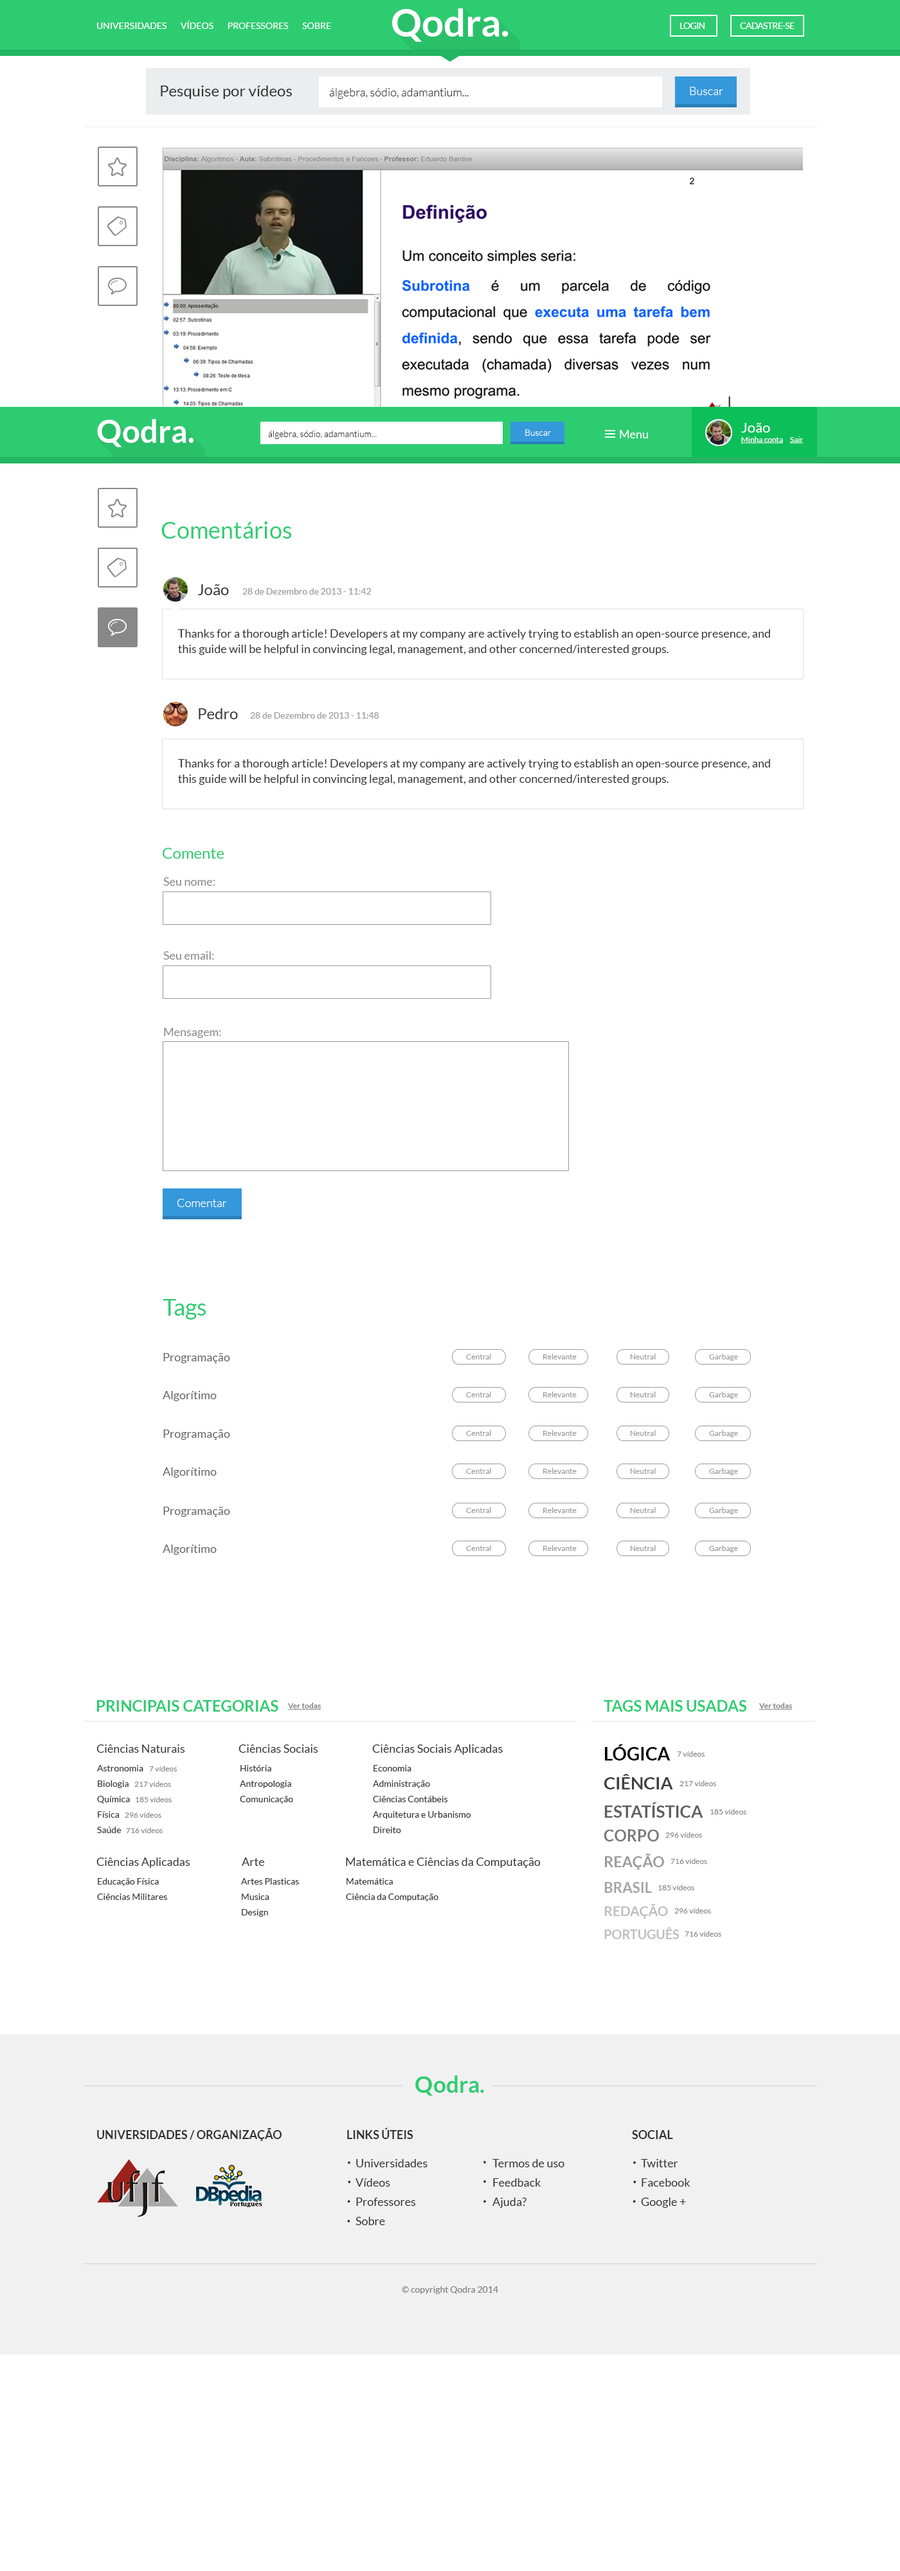
<style>
.page{position:relative;width:900px;height:2571px;background:#ffffff}
.page>*{position:absolute;margin:0}
.t1{font:38.3px "Lato-Bold";color:#ffffff}
.t2{font:9px "Lato-Regular";color:#ffffff}
.t3{font:9px "Lato-Regular";letter-spacing:-0.05em;color:#ffffff}
.t4{font:15.4px "Lato-Regular";color:#333333}
.t5{font:11.6px "Lato-Light";color:#333333}
.t6{font:11.6px "Lato-Light";color:#ffffff}
.t7{font:31.8px "Lato-Bold";color:#ffffff}
.t8{font:14.1px "Lato-Regular";color:#ffffff}
.t9{font:9px "Lato-Light";color:#333333}
.t10{font:9px "Lato-Light";color:#ffffff}
.t11{font:11.6px "Lato-Regular";color:#ffffff}
.t12{font:7.7px "Lato-Regular";color:#ffffff;text-decoration:underline}
.t13{font:23.1px "Lato-Regular";color:#2ecc71}
.t14{font:9px "Lato-Regular";color:#999999}
.t15{font:11.6px/15.4px "Lato-Regular";color:#333333}
.t16{font:15.4px "Lato-Regular";color:#2ecc71}
.t17{font:11.6px "Lato-Regular";color:#888888}
.t18{font:11.6px "Lato-Regular";color:#666666}
.t19{font:7.7px "Lato-Regular";color:#999999}
.t20{font:15.4px "Lato-Bold";color:#2ecc71;text-transform:uppercase}
.t21{font:7.7px "Lato-Bold";color:#818181;text-decoration:underline}
.t22{font:11.6px "Lato-Regular";color:#333333}
.t23{font:18px "Lato-Bold";color:#000000;text-transform:uppercase}
.t24{font:7.7px "Lato-Regular";color:#878686}
.t25{font:9px/15.4px "Lato-Regular";color:#333333}
.t26{font:17.3px "Lato-Bold";color:#404040;text-transform:uppercase}
.t27{font:16.5px "Lato-Bold";color:#5f5f5f;text-transform:uppercase}
.t28{font:15.8px "Lato-Bold";color:#797979;text-transform:uppercase}
.t29{font:15px "Lato-Bold";color:#9a9a9a;text-transform:uppercase}
.t30{font:14.3px "Lato-Bold";color:#a4a4a4;text-transform:uppercase}
.t31{font:13.5px "Lato-Bold";color:#bebebe;text-transform:uppercase}
.t32{font:12.8px "Lato-Bold";color:#bebebe;text-transform:uppercase}
.t33{font:23.4px "Lato-Bold";color:#2ecc71}
.t34{font:11.6px "Lato-Bold";color:#333333;text-transform:uppercase}
.t35{font:11.6px/19.3px "Lato-Regular";color:#333333}
.t36{font:9.3px "Lato-Regular";color:#7d7d7d}
</style>
<div class="page">
<p class="t1" style="left:392px;top:8px;width:117px;height:34px">Qodra.</p>
<p class="t2" style="left:97px;top:21px;width:234px;height:8px">UNIVERSIDADES        VÍDEOS        PROFESSORES        SOBRE</p>
<p class="t3" style="left:680px;top:22px;width:25px;height:7px">LOGIN</p>
<p class="t3" style="left:740px;top:22px;width:55px;height:7px">CADASTRE-SE</p>
<p class="t4" style="left:161px;top:86px;width:131px;height:13px">Pesquise por vídeos</p>
<p class="t5" style="left:329px;top:88px;width:140px;height:11px">álgebra, sódio, adamantium...</p>
<p class="t6" style="left:690px;top:87px;width:33px;height:8px">Buscar</p>
<p class="t7" style="left:97px;top:419px;width:97px;height:28px">Qodra.</p>
<p class="t8" style="left:741px;top:423px;width:29px;height:10px">João</p>
<p class="t9" style="left:268px;top:431px;width:109px;height:8px">álgebra, sódio, adamantium...</p>
<p class="t10" style="left:525px;top:429px;width:26px;height:7px">Buscar</p>
<p class="t11" style="left:620px;top:430px;width:28px;height:8px">Menu</p>
<p class="t12" style="left:741px;top:437px;width:43px;height:7px">Minha conta</p>
<p class="t12" style="left:789px;top:437px;width:15px;height:7px">Sair</p>
<p class="t13" style="left:161px;top:521px;width:131px;height:18px">Comentários</p>
<p class="t4" style="left:197px;top:584px;width:32px;height:11px">João</p>
<p class="t14" style="left:242px;top:588px;width:129px;height:7px">28 de Dezembro de 2013 - 11:42</p>
<p class="t15" style="left:177px;top:629px;width:593px;height:26px">Thanks for a thorough article! Developers at my company are actively trying to establish an open-source presence, and this guide will be helpful in convincing legal, management, and other concerned/interested groups.</p>
<p class="t4" style="left:199px;top:708px;width:39px;height:11px">Pedro</p>
<p class="t14" style="left:250px;top:712px;width:129px;height:7px">28 de Dezembro de 2013 - 11:48</p>
<p class="t15" style="left:177px;top:759px;width:593px;height:26px">Thanks for a thorough article! Developers at my company are actively trying to establish an open-source presence, and this guide will be helpful in convincing legal, management, and other concerned/interested groups.</p>
<p class="t16" style="left:163px;top:848px;width:61px;height:11px">Comente</p>
<p class="t17" style="left:163px;top:878px;width:52px;height:8px">Seu nome:</p>
<p class="t17" style="left:163px;top:951px;width:51px;height:9px">Seu email:</p>
<p class="t17" style="left:164px;top:1028px;width:57px;height:10px">Mensagem:</p>
<p class="t6" style="left:177px;top:1199px;width:50px;height:8px">Comentar</p>
<p class="t13" style="left:163px;top:1299px;width:43px;height:21px">Tags</p>
<p class="t18" style="left:163px;top:1353px;width:67px;height:11px">Programação</p>
<p class="t19" style="left:466px;top:1354px;width:25px;height:6px">Central</p>
<p class="t19" style="left:543px;top:1354px;width:34px;height:6px">Relevante</p>
<p class="t19" style="left:630px;top:1354px;width:26px;height:6px">Neutral</p>
<p class="t19" style="left:709px;top:1354px;width:29px;height:7px">Garbage</p>
<p class="t18" style="left:163px;top:1391px;width:54px;height:10px">Algorítimo</p>
<p class="t19" style="left:466px;top:1392px;width:25px;height:6px">Central</p>
<p class="t19" style="left:543px;top:1392px;width:34px;height:6px">Relevante</p>
<p class="t19" style="left:630px;top:1392px;width:26px;height:6px">Neutral</p>
<p class="t19" style="left:709px;top:1392px;width:29px;height:7px">Garbage</p>
<p class="t18" style="left:163px;top:1430px;width:67px;height:10px">Programação</p>
<p class="t19" style="left:466px;top:1430px;width:25px;height:6px">Central</p>
<p class="t19" style="left:543px;top:1430px;width:34px;height:6px">Relevante</p>
<p class="t19" style="left:630px;top:1430px;width:26px;height:6px">Neutral</p>
<p class="t19" style="left:709px;top:1430px;width:29px;height:7px">Garbage</p>
<p class="t18" style="left:163px;top:1468px;width:54px;height:10px">Algorítimo</p>
<p class="t19" style="left:466px;top:1468px;width:25px;height:6px">Central</p>
<p class="t19" style="left:543px;top:1468px;width:34px;height:6px">Relevante</p>
<p class="t19" style="left:630px;top:1468px;width:26px;height:6px">Neutral</p>
<p class="t19" style="left:709px;top:1468px;width:29px;height:7px">Garbage</p>
<p class="t18" style="left:163px;top:1507px;width:67px;height:10px">Programação</p>
<p class="t19" style="left:466px;top:1508px;width:25px;height:5px">Central</p>
<p class="t19" style="left:543px;top:1508px;width:34px;height:5px">Relevante</p>
<p class="t19" style="left:630px;top:1508px;width:26px;height:5px">Neutral</p>
<p class="t19" style="left:709px;top:1508px;width:29px;height:7px">Garbage</p>
<p class="t18" style="left:163px;top:1545px;width:54px;height:10px">Algorítimo</p>
<p class="t19" style="left:466px;top:1545px;width:25px;height:6px">Central</p>
<p class="t19" style="left:543px;top:1545px;width:34px;height:6px">Relevante</p>
<p class="t19" style="left:630px;top:1545px;width:26px;height:6px">Neutral</p>
<p class="t19" style="left:709px;top:1545px;width:29px;height:8px">Garbage</p>
<p class="t20" style="left:96px;top:1700px;width:182px;height:12px">Principais categorias</p>
<p class="t21" style="left:288px;top:1703px;width:33px;height:7px">Ver todas</p>
<p class="t20" style="left:604px;top:1700px;width:143px;height:12px">Tags mais usadas</p>
<p class="t21" style="left:759px;top:1703px;width:34px;height:7px">Ver todas</p>
<p class="t22" style="left:96px;top:1745px;width:89px;height:8px">Ciências Naturais</p>
<p class="t22" style="left:239px;top:1745px;width:79px;height:8px">Ciências Sociais</p>
<p class="t22" style="left:372px;top:1745px;width:131px;height:10px">Ciências Sociais Aplicadas</p>
<p class="t23" style="left:605px;top:1744px;width:65px;height:17px">Lógica</p>
<p class="t24" style="left:677px;top:1751px;width:28px;height:6px">7 vídeos</p>
<p class="t25" style="left:97px;top:1765px;width:46px;height:68px">Astronomia<br>Biologia<br>Química<br>Física<br>Saúde</p>
<p class="t24" style="left:149px;top:1766px;width:28px;height:6px">7 vídeos</p>
<p class="t25" style="left:240px;top:1765px;width:53px;height:39px">História<br>Antropologia<br>Comunicação</p>
<p class="t25" style="left:373px;top:1765px;width:98px;height:68px">Economia<br>Administração<br>Ciências Contábeis<br>Arquitetura e Urbanismo<br>Direito</p>
<p class="t24" style="left:134px;top:1781px;width:37px;height:6px">217 vídeos</p>
<p class="t26" style="left:604px;top:1774px;width:69px;height:16px">Ciência</p>
<p class="t24" style="left:680px;top:1781px;width:36px;height:6px">217 vídeos</p>
<p class="t24" style="left:136px;top:1797px;width:36px;height:6px">185 vídeos</p>
<p class="t27" style="left:604px;top:1803px;width:99px;height:15px">Estatística</p>
<p class="t24" style="left:125px;top:1812px;width:36px;height:6px">296 vídeos</p>
<p class="t24" style="left:710px;top:1809px;width:36px;height:6px">185 vídeos</p>
<p class="t24" style="left:126px;top:1828px;width:37px;height:5px">716 vídeos</p>
<p class="t28" style="left:604px;top:1830px;width:55px;height:12px">CORPO</p>
<p class="t24" style="left:665px;top:1832px;width:37px;height:6px">296 vídeos</p>
<p class="t22" style="left:96px;top:1858px;width:94px;height:10px">Ciências Aplicadas</p>
<p class="t22" style="left:242px;top:1858px;width:23px;height:8px">Arte</p>
<p class="t22" style="left:346px;top:1858px;width:195px;height:10px">Matemática e Ciências da Computação</p>
<p class="t29" style="left:605px;top:1854px;width:59px;height:16px">Reação</p>
<p class="t24" style="left:670px;top:1859px;width:37px;height:5px">716 vídeos</p>
<p class="t25" style="left:97px;top:1878px;width:70px;height:22px">Educação Física<br>Ciências Militares</p>
<p class="t25" style="left:241px;top:1878px;width:58px;height:39px">Artes Plasticas<br>Musica<br>Design</p>
<p class="t25" style="left:346px;top:1878px;width:92px;height:24px">Matemática<br>Ciência da Computação</p>
<p class="t30" style="left:604px;top:1882px;width:48px;height:11px">Brasil</p>
<p class="t24" style="left:658px;top:1885px;width:36px;height:6px">185 vídeos</p>
<p class="t31" style="left:604px;top:1904px;width:64px;height:15px">Redação</p>
<p class="t24" style="left:674px;top:1908px;width:37px;height:6px">296 vídeos</p>
<p class="t32" style="left:604px;top:1927px;width:76px;height:13px">Português</p>
<p class="t24" style="left:685px;top:1931px;width:36px;height:6px">716 vídeos</p>
<p class="t33" style="left:415px;top:2076px;width:69px;height:20px">Qodra.</p>
<p class="t34" style="left:97px;top:2128px;width:185px;height:13px">Universidades / Organização</p>
<p class="t34" style="left:347px;top:2128px;width:66px;height:11px">Links úteis</p>
<p class="t34" style="left:632px;top:2130px;width:41px;height:9px">Social</p>
<p class="t35" style="left:356px;top:2159px;width:72px;height:67px">Universidades<br>Vídeos<br>Professores<br>Sobre</p>
<p class="t35" style="left:492px;top:2159px;width:72px;height:49px">Termos de uso<br>Feedback<br>Ajuda?</p>
<p class="t35" style="left:641px;top:2159px;width:49px;height:49px">Twitter<br>Facebook<br>Google +</p>
<p class="t36" style="left:402px;top:2287px;width:96px;height:7px">© copyright Qodra 2014</p>
</div>
